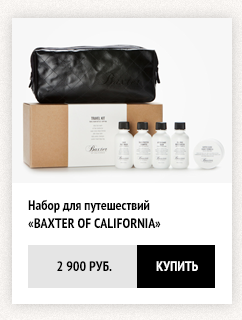
<style>
.page{position:relative;width:242px;height:320px;background:#ffffff}
.page>*{position:absolute;margin:0}
.t1{font:14px/18px "PTSans-NarrowBold";color:#000000;text-transform:uppercase}
.t2{font:14px/18px "PTSans-NarrowBold";color:#000000}
.t3{font:14px "PTSans-NarrowBold";color:#000000;text-transform:uppercase}
.t4{font:14px "PTSans-NarrowBold";color:#ffffff;text-transform:uppercase}
</style>
<div class="page">
<p class="t1" style="left:28px;top:199px;width:133px;height:29px">Н<span class="t2">абор для путешествий <br></span>«Baxter of California»</p>
<p class="t3" style="left:57px;top:261px;width:55px;height:10px">2 900 РУБ.</p>
<p class="t4" style="left:156px;top:261px;width:42px;height:10px">КУПИТЬ</p>
</div>
